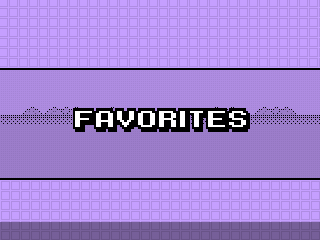
<style>
.page{position:relative;width:320px;height:240px;background:#af8de3}
.page>*{position:absolute;margin:0}
.t1{font:24px "KarmaticArcade";color:#000000}
</style>
<div class="page">
<p class="t1" style="left:27px;top:108px;width:268px;height:24px">GAMES AND APPS</p>
<p class="t1" style="left:73px;top:108px;width:177px;height:24px">FAVORITES</p>
</div>
